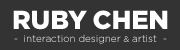
<style>
.page{position:relative;width:180px;height:50px;background:#333333}
.page>*{position:absolute;margin:0}
.t1{font:26px "Gotham-Black";color:#ffffff}
.t2{font:10px "Gotham-Light";letter-spacing:-0.005em}
.t3{font:8px "Gotham-Light";letter-spacing:-0.005em}
</style>
<div class="page">
<p class="t1" style="left:13px;top:10px;width:155px;height:20px">RUBY CHEN</p>
<p class="t2" style="left:14px;top:34px;width:153px;height:10px">-  interaction designer <span class="t3">&amp;</span> artist  -</p>
</div>
